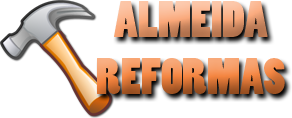
<style>
.page{position:relative;width:292px;height:118px;background:#ffffff}
.page>*{position:absolute;margin:0}
.t1{font:48px "PoplarStd"}
</style>
<div class="page">
<p class="t1" style="left:97px;top:1px;width:188px;height:93px;text-align:center">ALMEIDA<br>REFORMAS</p>
</div>
